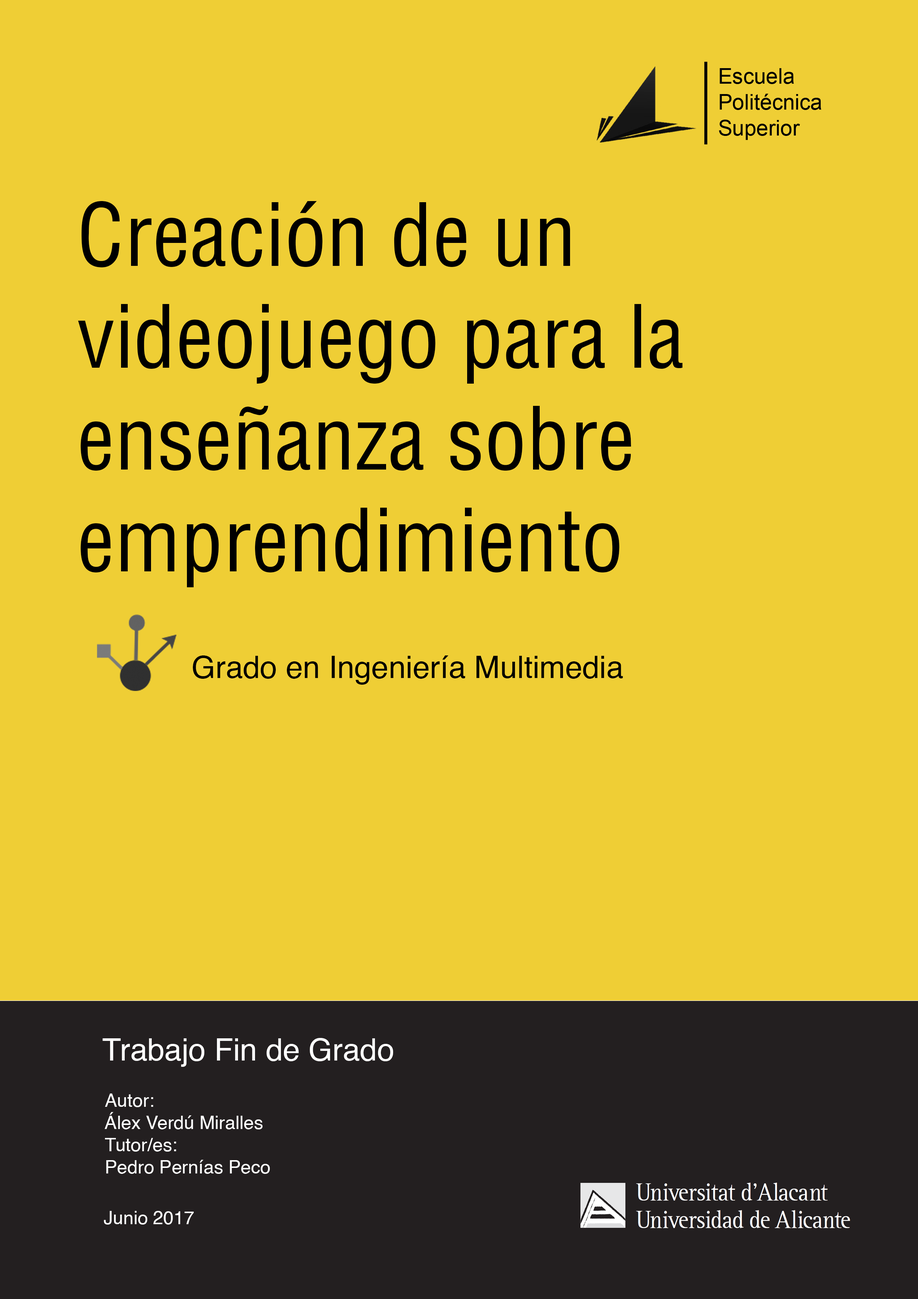
<style>
.page{position:relative;width:918px;height:1299px;background:#efce35}
.page>*{position:absolute;margin:0}
.t1{font:84.8px "HelveticaLTStd-Cond";color:#000000}
.t2{font:30.9px "Helvetica";color:#000000}
.t3{font:30.9px "Helvetica";color:#ffffff}
.t4{font:18.5px "Helvetica";color:#ffffff}
</style>
<div class="page">
<p class="t1" style="left:78px;top:201px;width:605px;height:386px">Creación de un videojuego para la enseñanza sobre emprendimiento</p>
<p class="t2" style="left:193px;top:655px;width:430px;height:30px">Grado en Ingeniería Multimedia</p>
<p class="t3" style="left:103px;top:1038px;width:290px;height:29px">Trabajo Fin de Grado</p>
<p class="t4" style="left:104px;top:1093px;width:166px;height:81px">Autor:<br>Álex Verdú Miralles<br>Tutor/es:<br>Pedro Pernías Peco</p>
<p class="t4" style="left:104px;top:1211px;width:90px;height:13px">Junio 2017</p>
</div>
